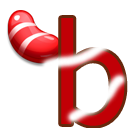
<style>
.page{position:relative;width:128px;height:128px;background:#ffffff}
.page>*{position:absolute;margin:0}
.t1{font:132.9px "SourceHanSansCN-Regular";color:#c10006}
</style>
<div class="page">
<p class="t1" style="left:61px;top:18px;width:64px;height:108px">b</p>
</div>
